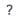
<style>
.page{position:relative;width:18px;height:18px;background:#ffffff}
.page>*{position:absolute;margin:0}
.t1{font:13px "NanumSquareB";color:#5c6066;font-weight:bold}
</style>
<div class="page">
<p class="t1" style="left:6px;top:4px;width:7px;height:11px">?</p>
</div>
